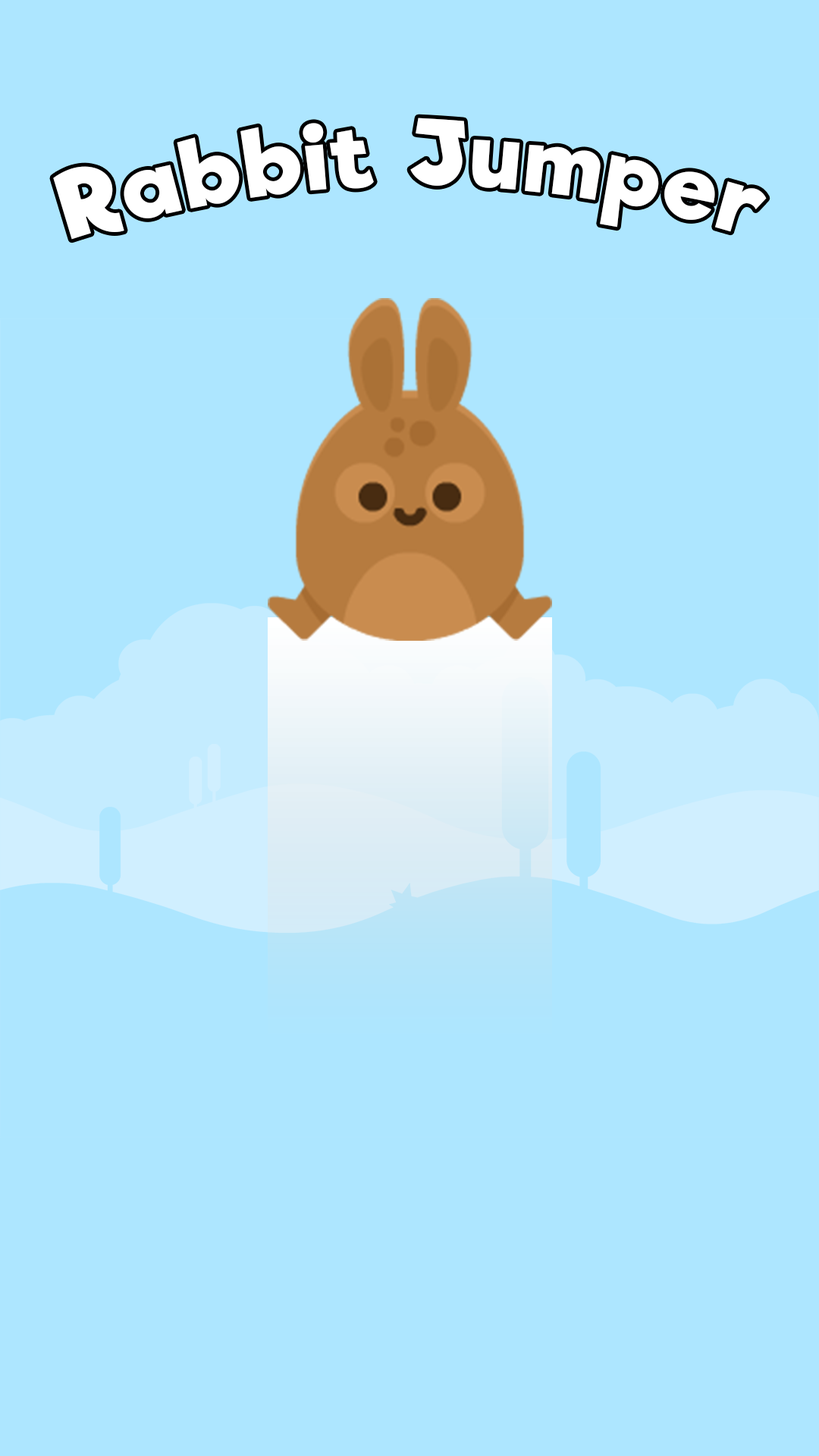
<style>
.page{position:relative;width:819px;height:1456px;background:#ade6ff}
.page>*{position:absolute;margin:0}
.t1{font:88.5px "Riffic-Bold";letter-spacing:0.05em;color:#ffffff}
</style>
<div class="page">
<p class="t1" style="left:53px;top:118px;width:714px;height:122px">Rabbit Jumper</p>
</div>
